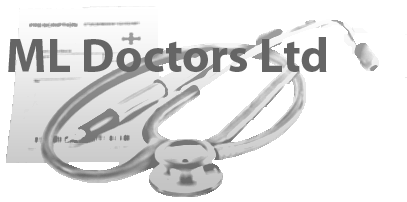
<style>
.page{position:relative;width:407px;height:202px;background:#ffffff}
.page>*{position:absolute;margin:0}
.t1{font:48px "MyriadPro-Bold";color:#646464}
</style>
<div class="page">
<p class="t1" style="left:8px;top:37px;width:319px;height:35px">ML Doctors Ltd</p>
</div>
